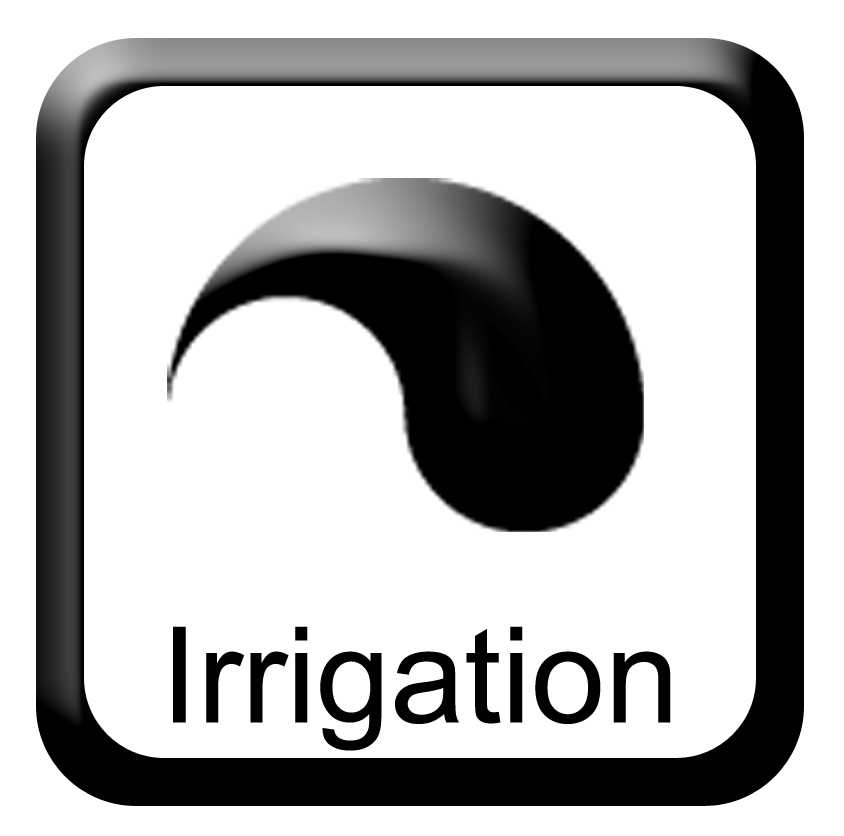
<style>
.page{position:relative;width:844px;height:836px;background:#ffffff}
.page>*{position:absolute;margin:0}
.t1{font:133.3px "ArialMT";color:#000000}
</style>
<div class="page">
<p class="t1" style="left:173px;top:626px;width:498px;height:125px">Irrigation</p>
</div>
